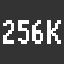
<style>
.page{position:relative;width:64px;height:64px;background:#333333}
.page>*{position:absolute;margin:0}
.t1{font:40.9px "Glasstown-NBP";letter-spacing:0.005em;color:#ffffff;font-weight:bold}
</style>
<div class="page">
<p class="t1" style="left:3px;top:20px;width:58px;height:24px">256K</p>
</div>
